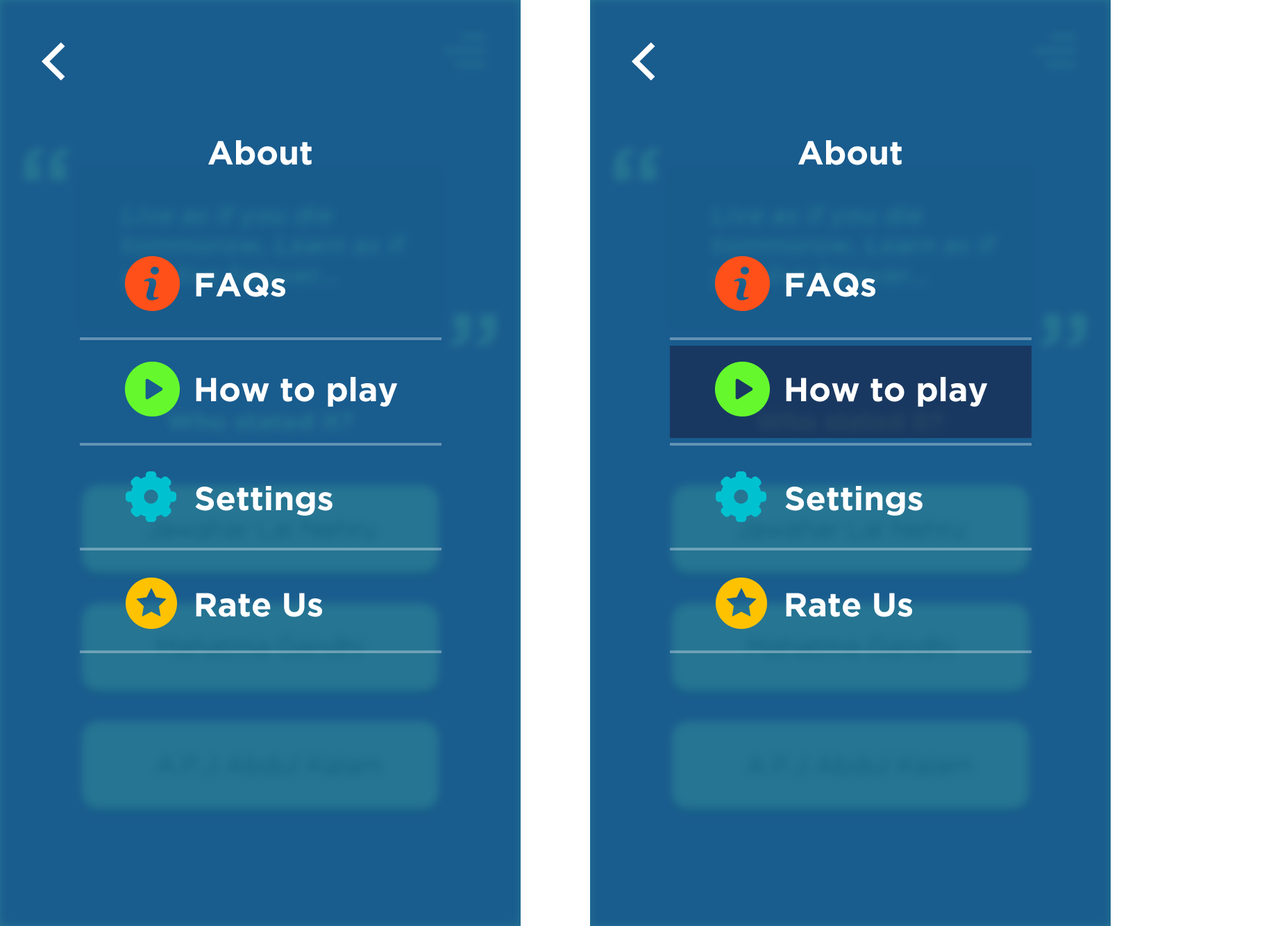
<style>
.page{position:relative;width:1287px;height:926px;background:#195c8e}
.page>*{position:absolute;margin:0}
.t1{font:33.3px "GothamBold";color:#ffffff}
</style>
<div class="page">
<p class="t1" style="left:208px;top:140px;width:104px;height:25px">About</p>
<p class="t1" style="left:799px;top:140px;width:103px;height:25px">About</p>
<p class="t1" style="left:196px;top:272px;width:89px;height:25px">FAQs</p>
<p class="t1" style="left:786px;top:272px;width:90px;height:25px">FAQs</p>
<p class="t1" style="left:196px;top:377px;width:202px;height:30px">How to play</p>
<p class="t1" style="left:786px;top:377px;width:202px;height:30px">How to play</p>
<p class="t1" style="left:195px;top:486px;width:138px;height:30px">Settings</p>
<p class="t1" style="left:785px;top:486px;width:138px;height:30px">Settings</p>
<p class="t1" style="left:196px;top:593px;width:126px;height:24px">Rate Us</p>
<p class="t1" style="left:786px;top:593px;width:126px;height:24px">Rate Us</p>
</div>
